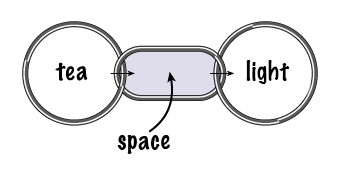
<style>
.page{position:relative;width:339px;height:170px;background:#ffffff}
.page>*{position:absolute;margin:0}
.t1{font:24px "MarkerFelt-Thin";color:#000000}
</style>
<div class="page">
<p class="t1" style="left:246px;top:60px;width:44px;height:24px">light</p>
<p class="t1" style="left:117px;top:135px;width:53px;height:19px">space</p>
</div>
